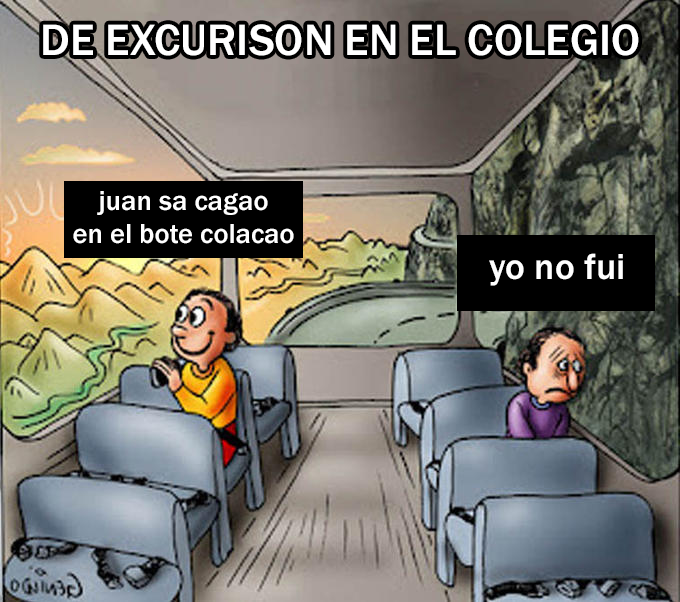
<style>
.page{position:relative;width:680px;height:602px}
.page>*{position:absolute;margin:0}
.t1{font:45.3px "FranklinGothic-Medium";color:#ffffff}
.t2{font:28.5px "FranklinGothic-Medium";color:#ffffff}
.t3{font:37.5px "FranklinGothic-Medium";color:#ffffff}
</style>
<div class="page">
<p class="t1" style="left:43px;top:24px;width:596px;height:32px">DE EXCURISON EN EL COLEGIO</p>
<p class="t2" style="left:73px;top:191px;width:221px;height:53px;text-align:center">juan sa cagao<br>en el bote colacao</p>
<p class="t3" style="left:489px;top:253px;width:134px;height:33px">yo no fui</p>
</div>
